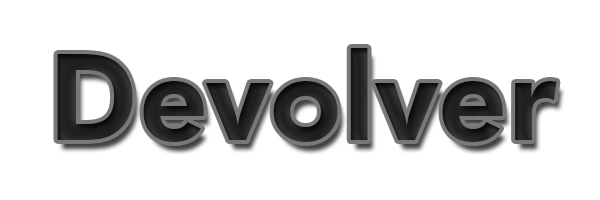
<style>
.page{position:relative;width:600px;height:200px;background:#ffffff}
.page>*{position:absolute;margin:0}
.t1{font:120px "FuturaBT-Heavy";color:#212121}
</style>
<div class="page">
<p class="t1" style="left:57px;top:48px;width:500px;height:94px">Devolver</p>
</div>
